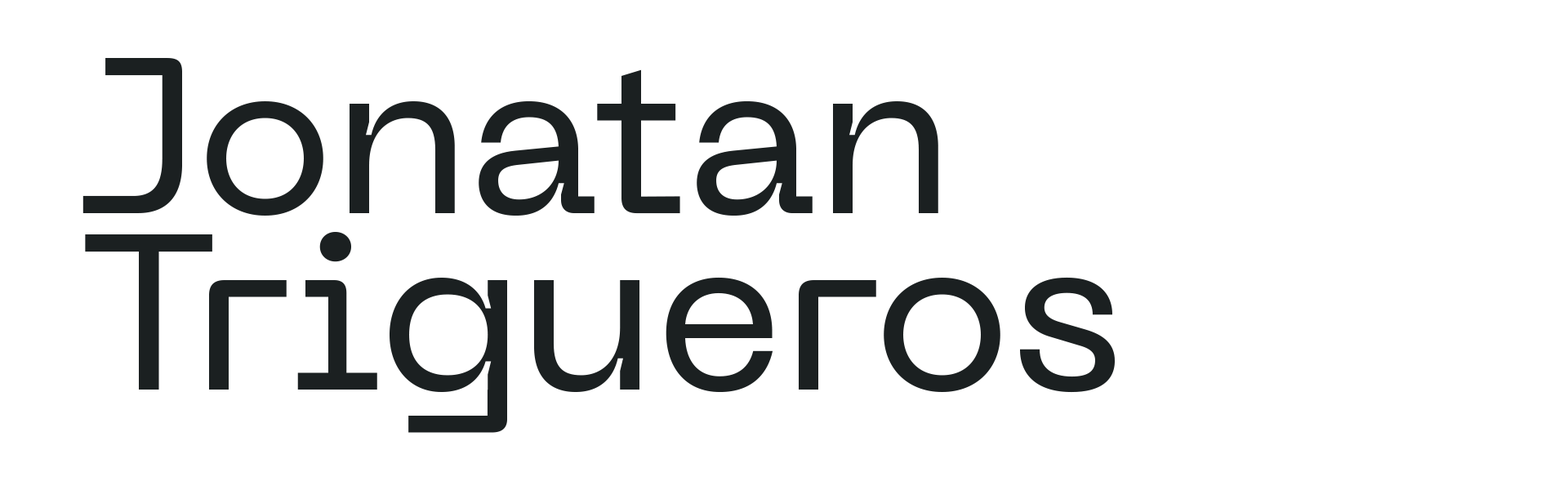
<style>
.page{position:relative;width:1568px;height:490px;background:#ffffff}
.page>*{position:absolute;margin:0}
.t1{font:220.5px "PPNeueMachina-InktrapRegular";color:#1b2021}
</style>
<div class="page">
<p class="t1" style="left:82px;top:58px;width:1033px;height:375px">Jonatan<br>Trigueros</p>
</div>
